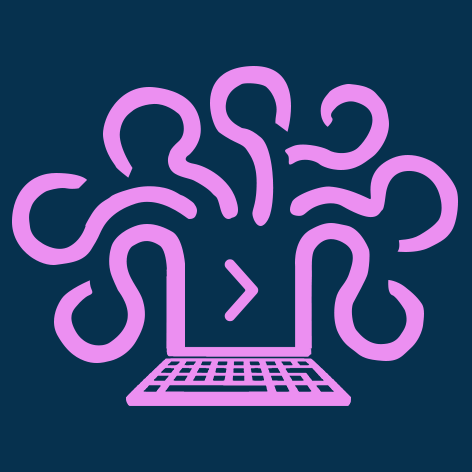
<style>
.page{position:relative;width:472px;height:472px;background:#06314e}
.page>*{position:absolute;margin:0}
.t1{font:106px "FVAlmelo";letter-spacing:-0.03em;color:#ec8ff1}
</style>
<div class="page">
<p class="t1" style="left:224px;top:259px;width:35px;height:63px">&gt;</p>
</div>
